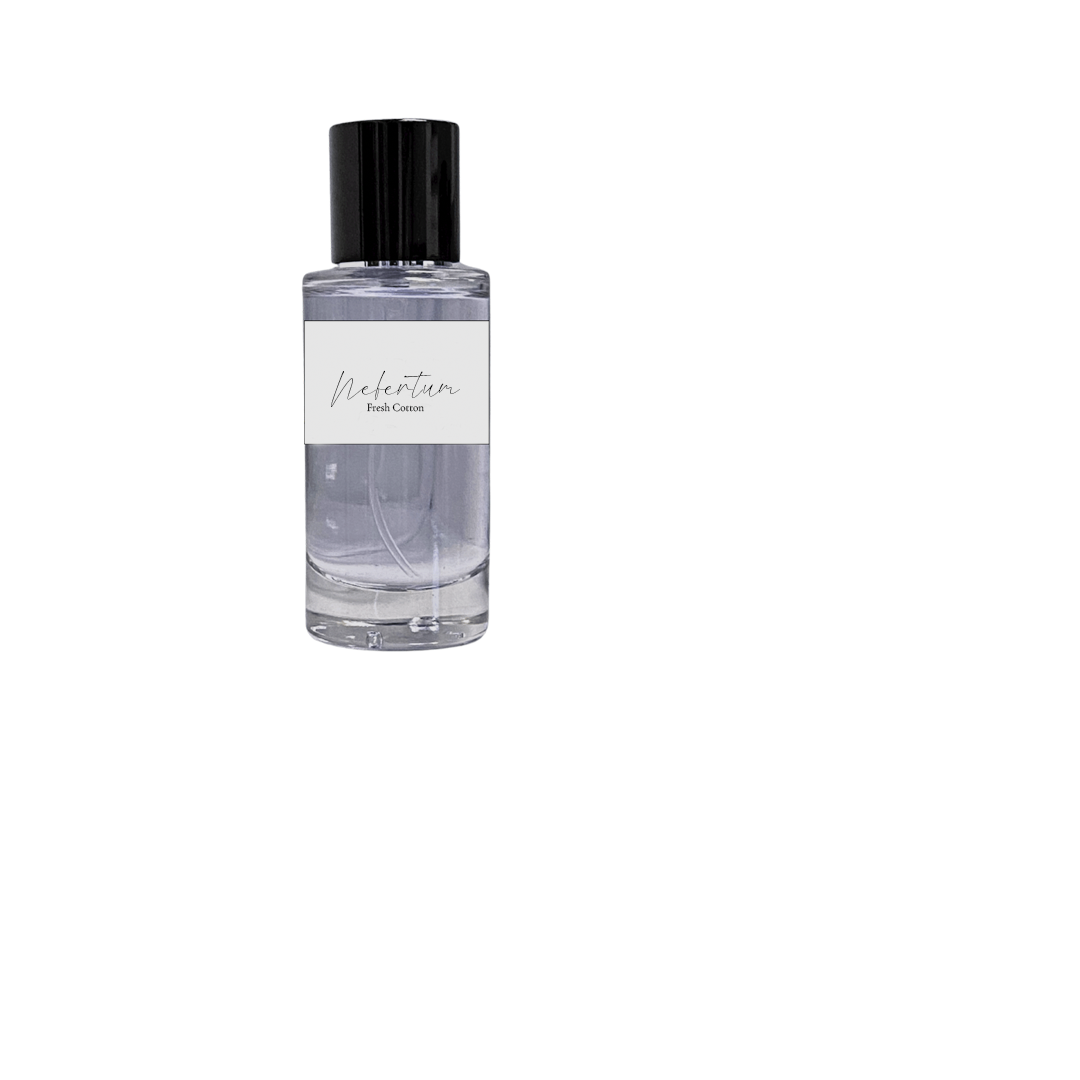
<style>
.page{position:relative;width:1080px;height:1080px;background:#ffffff}
.page>*{position:absolute;margin:0}
.t1{font:45.8px "Violentica";color:#000000;scale:0.96 1}
.t2{font:11.4px "CormorantGaramond-Regular";color:#000000;scale:0.96 1}
</style>
<div class="page">
<p class="t1" style="left:331px;top:370px;width:129px;height:37px">Nefertum</p>
<p class="t2" style="left:367px;top:402px;width:57px;height:10px">Fresh Cotton</p>
</div>
